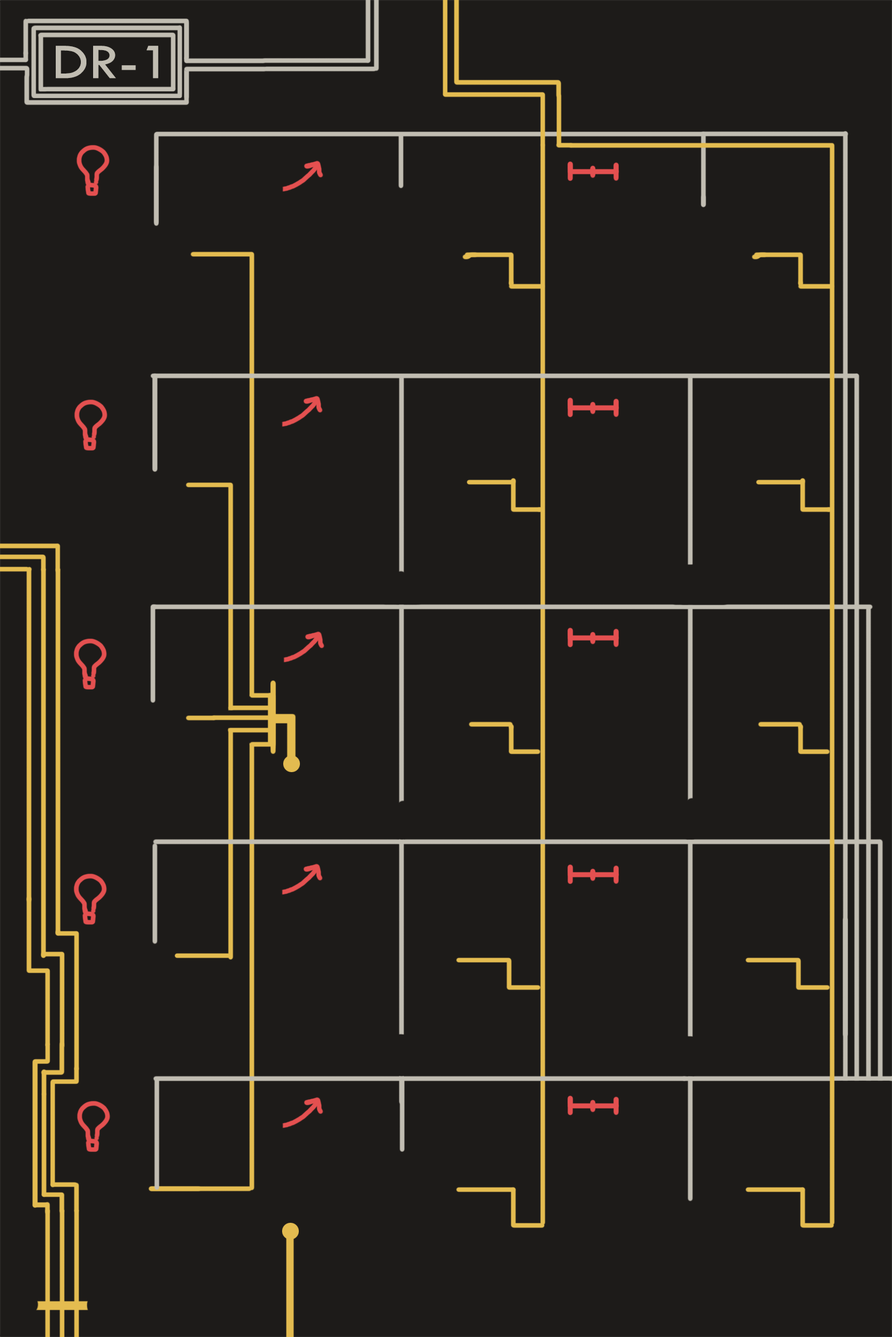
<style>
.page{position:relative;width:892px;height:1337px;background:#1d1b19}
.page>*{position:absolute;margin:0}
.t1{font:51.7px "TwCenMT-Regular";color:#c1bdb2;scale:1.17 1}
</style>
<div class="page">
<p class="t1" style="left:56px;top:46px;width:102px;height:33px">DR-1</p>
</div>
